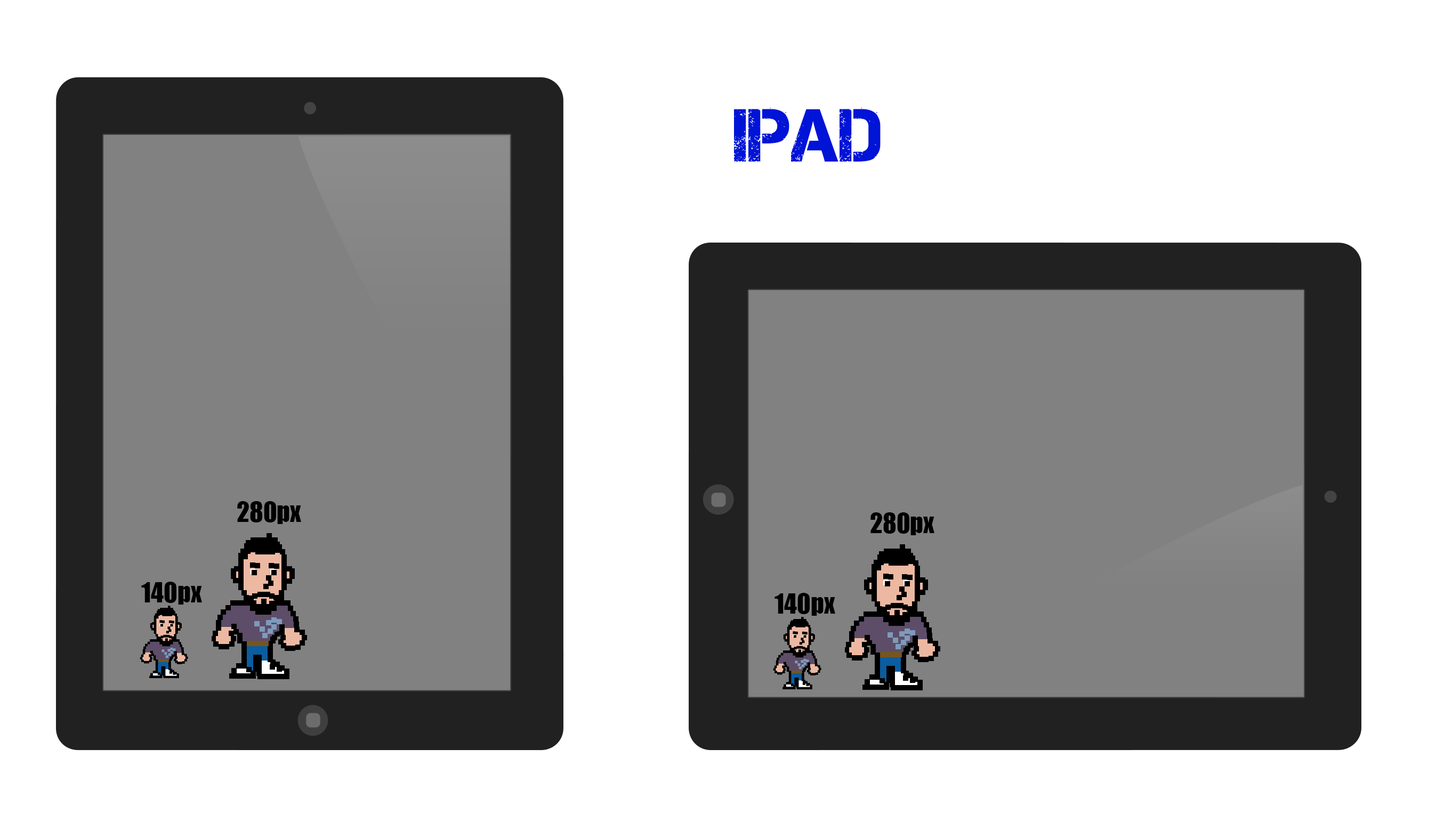
<style>
.page{position:relative;width:1452px;height:821px;background:#ffffff}
.page>*{position:absolute;margin:0}
.t1{font:74.6px "Captureit";color:#0014d7}
.t2{font:25.6px "Impact";color:#000000}
</style>
<div class="page">
<p class="t1" style="left:734px;top:108px;width:147px;height:54px">iPad</p>
<p class="t2" style="left:237px;top:501px;width:64px;height:23px">280px</p>
<p class="t2" style="left:871px;top:512px;width:64px;height:23px">280px</p>
<p class="t2" style="left:141px;top:582px;width:61px;height:23px">140px</p>
<p class="t2" style="left:775px;top:593px;width:60px;height:23px">140px</p>
</div>
